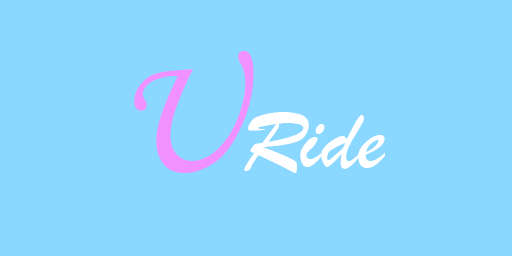
<style>
.page{position:relative;width:512px;height:256px;background:#8ad7ff}
.page>*{position:absolute;margin:0}
.t1{font:175px "STLiti";color:#f190ff}
.t2{font:90px "BrushScriptMT";color:#ffffff}
</style>
<div class="page">
<p class="t1" style="left:134px;top:50px;width:120px;height:123px">U</p>
<p class="t2" style="left:244px;top:112px;width:141px;height:61px">Ride</p>
</div>
